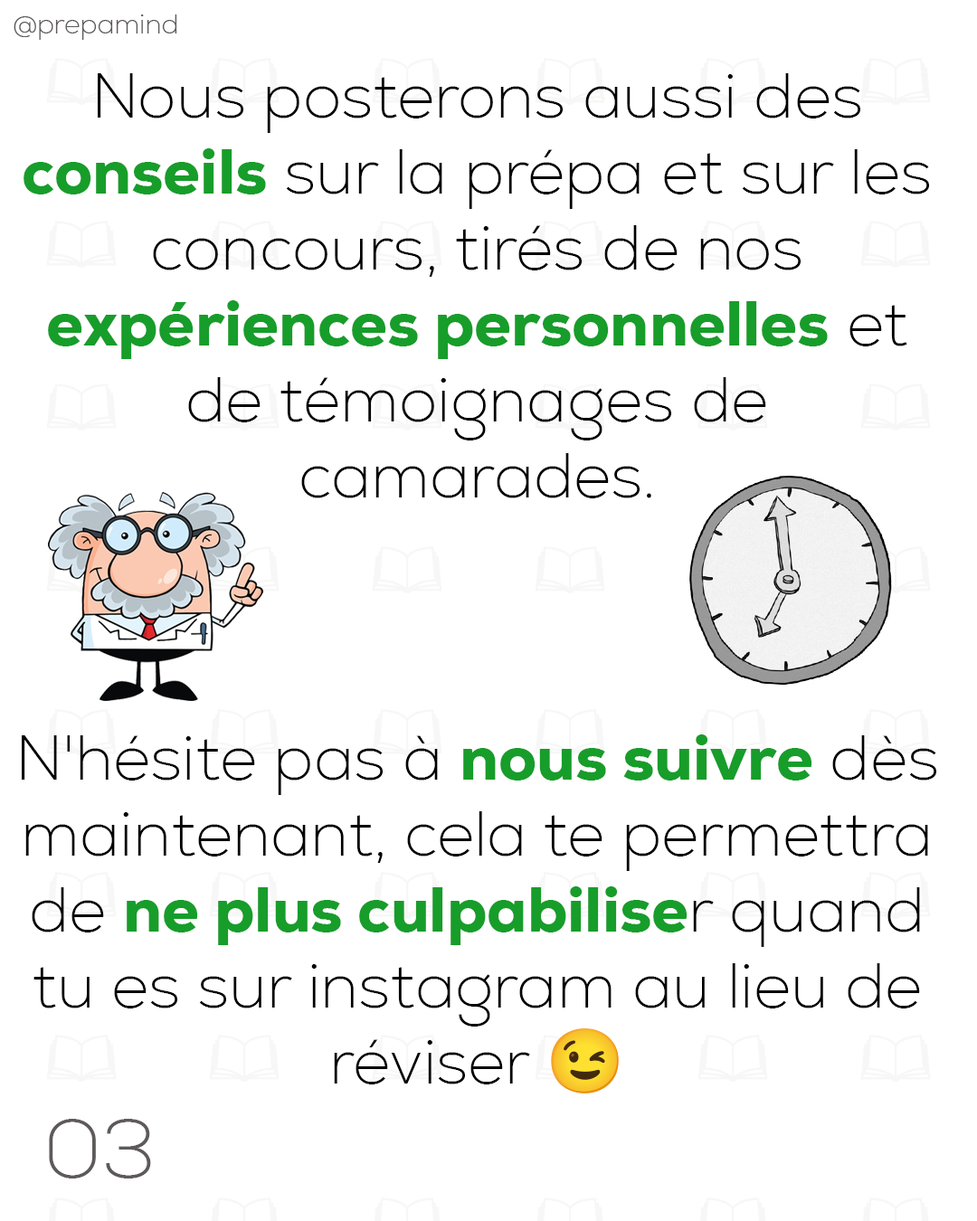
<style>
.page{position:relative;width:977px;height:1221px;background:#ffffff}
.page>*{position:absolute;margin:0}
.t1{font:27.1px "Nexa-ExtraLight";color:#5e5a5a}
.t2{font:63.3px "Nexa-ExtraLight";color:#000000}
.t3{font:63.3px "Nexa-Heavy";color:#179d2a}
.t4{font:63.3px "NotoColorEmoji-SVG";color:#000000}
.t5{font:81.7px "Nexa-ExtraLight";color:#5e5a5a}
</style>
<div class="page">
<p class="t1" style="left:14px;top:14px;width:163px;height:26px">@prepamind</p>
<p class="t2" style="left:22px;top:73px;width:914px;height:1020px;text-align:center">Nous posterons aussi des <span class="t3">conseils</span> sur la prépa et sur les concours, tirés de nos <span class="t3">expériences personnelles</span> et de témoignages de camarades. <br><br><br><br><br><br>N'hésite pas à <span class="t3">nous suivre</span> dès maintenant, cela te permettra de <span class="t3">ne plus culpabilise</span>r quand tu es sur instagram au lieu de réviser <span class="t4">😉</span></p>
<p class="t5" style="left:49px;top:1119px;width:102px;height:59px">03</p>
</div>
